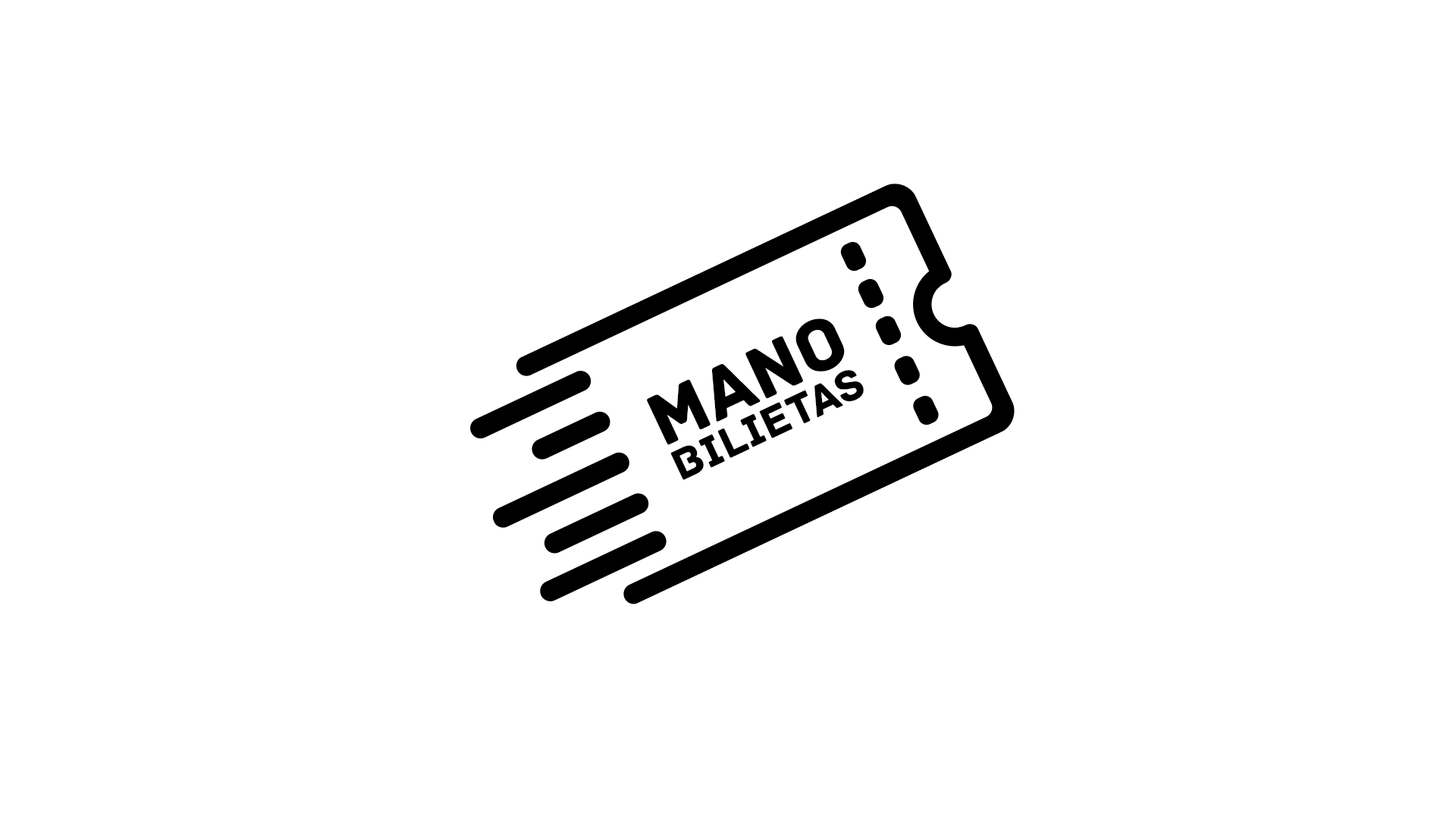
<style>
.page{position:relative;width:1456px;height:819px;background:#ffffff}
.page>*{position:absolute;margin:0}
.t1{font:76.6px "Archive";color:#000000}
.t2{font:45.5px "Archive";color:#000000}
</style>
<div class="page">
<p class="t1" style="left:647px;top:318px;width:198px;height:127px;rotate:-25deg">MANO</p>
<p class="t2" style="left:670px;top:370px;width:194px;height:110px;rotate:-25deg">BILIETAS</p>
</div>
